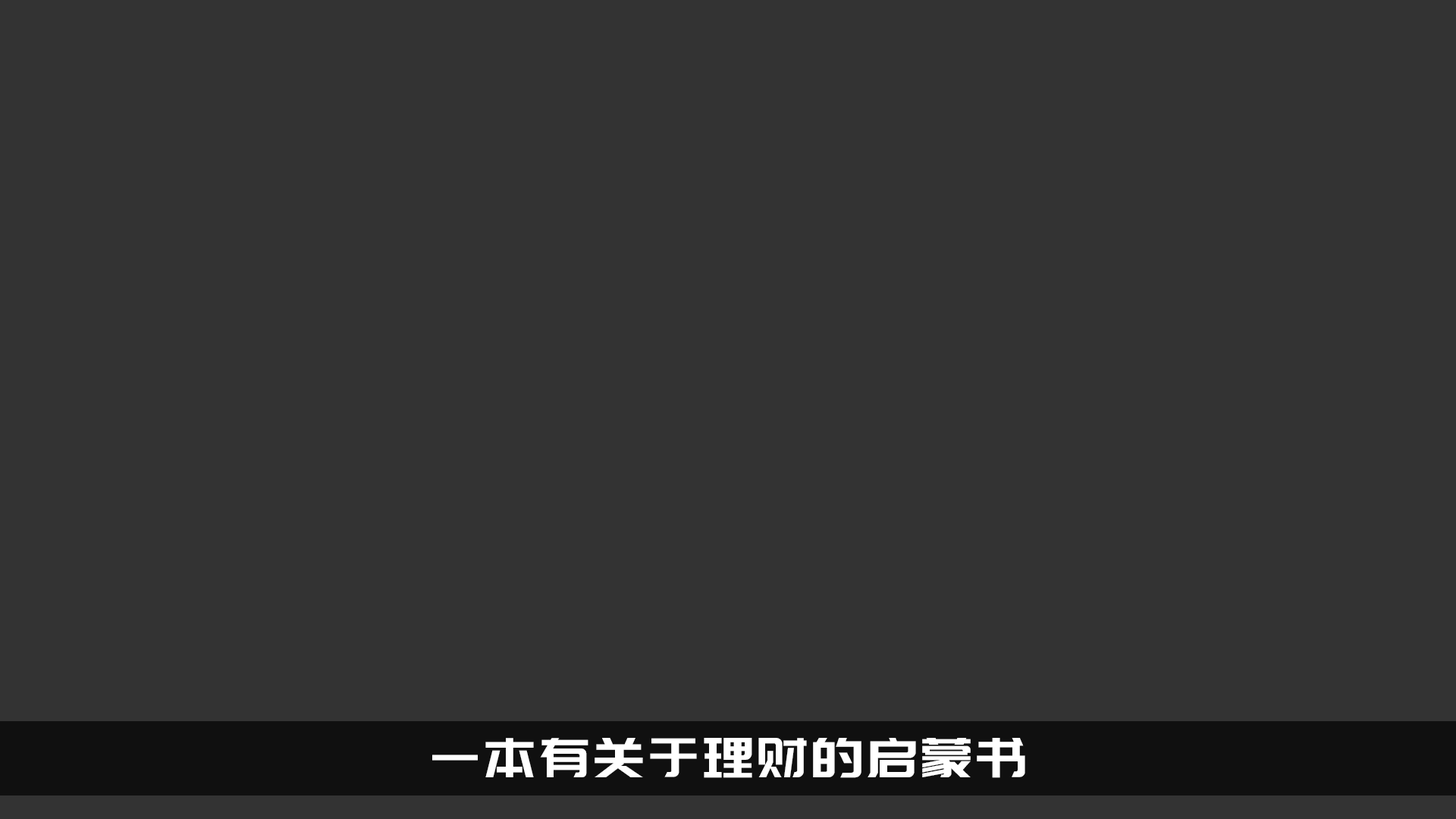
<style>
.page{position:relative;width:1456px;height:819px;background:#333333}
.page>*{position:absolute;margin:0}
.t1{font:54.6px "PangMenZhengDao-3";color:#ffffff}
</style>
<div class="page">
<p class="t1" style="left:432px;top:738px;width:593px;height:40px">一本有关于理财的启蒙书</p>
</div>
